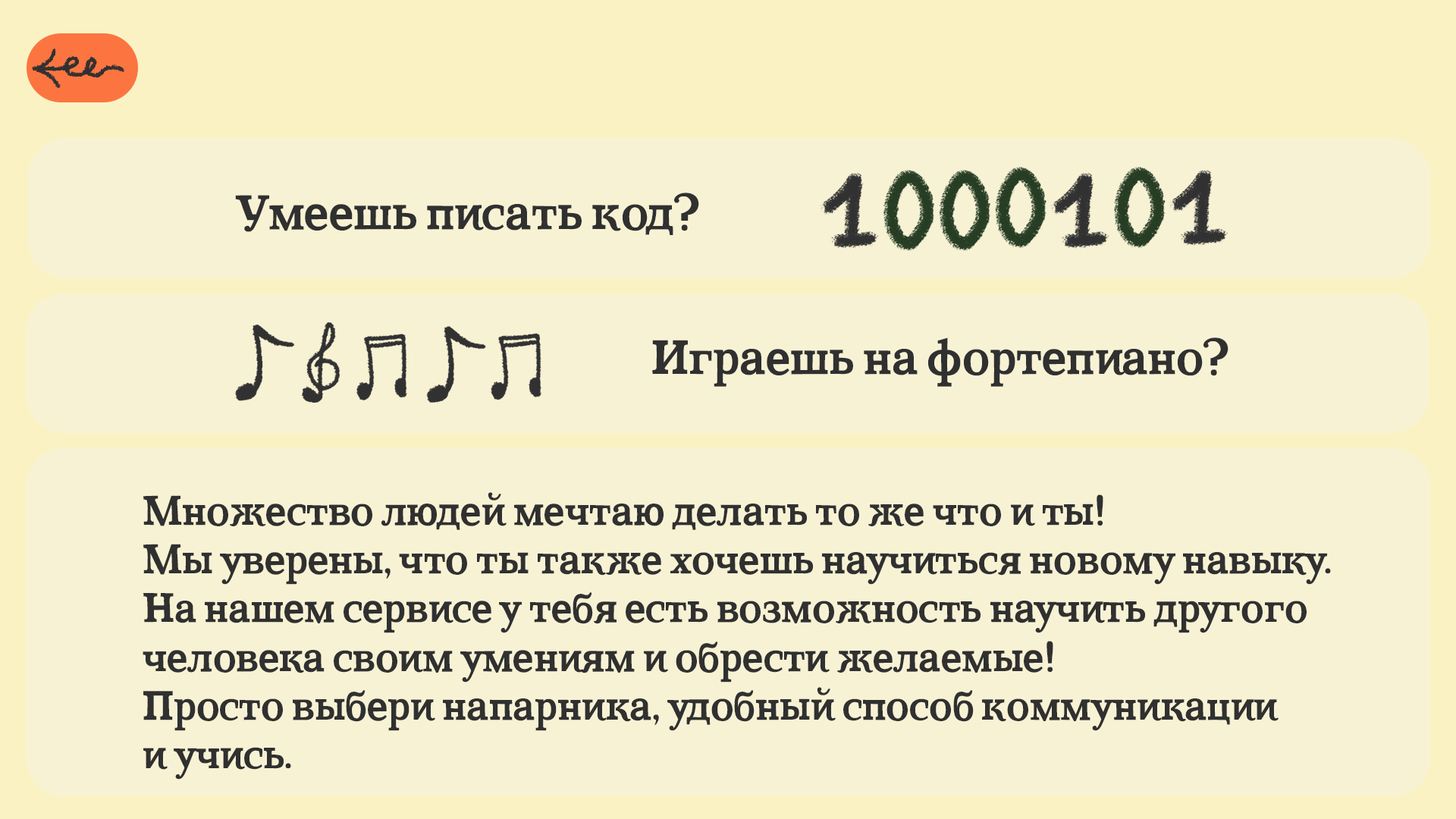
<style>
.page{position:relative;width:1456px;height:819px;background:#f8f2d5}
.page>*{position:absolute;margin:0}
.t1{font:47.9px "CoatsBold-Bold";color:#303030}
.t2{font:40.6px "CoatsBold-Bold";color:#303030}
</style>
<div class="page">
<p class="t1" style="left:235px;top:193px;width:464px;height:42px">Умеешь писать код?</p>
<p class="t1" style="left:652px;top:337px;width:576px;height:50px">Играешь на фортепиано?</p>
<p class="t2" style="left:143px;top:492px;width:1188px;height:288px">Множество людей мечтаю делать то же что и ты!<br>Мы уверены, что ты также хочешь научиться новому навыку. <br>На нашем сервисе у тебя есть возможность научить другого<br>человека своим умениям и обрести желаемые!<br>Просто выбери напарника, удобный способ коммуникации<br>и учись.</p>
</div>
